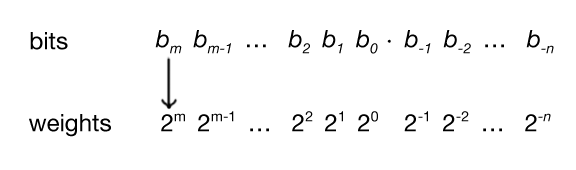
<style>
.page{position:relative;width:576px;height:170px;background:#ffffff}
.page>*{position:absolute;margin:0}
.t1{font:24px "HelveticaNeue-Italic";color:#000000}
.t2{font:24px "HelveticaNeue";color:#000000}
.t3{font:24px "STIXGeneral-Regular";color:#000000}
</style>
<div class="page">
<p class="t1" style="left:155px;top:30px;width:399px;height:24px">bm   bm-1   <span class="t2">…</span>   b2   b1   b0  <span class="t3">⋅  </span>b-1   b-2   <span class="t2">…   </span>b-n</p>
<p class="t2" style="left:30px;top:32px;width:38px;height:18px">bits</p>
<p class="t2" style="left:161px;top:111px;width:390px;height:21px">2m   2m-1   …   22   21   20     2-1   2-2   …   2<span class="t1">-n</span></p>
<p class="t2" style="left:29px;top:114px;width:82px;height:23px">weights</p>
</div>
